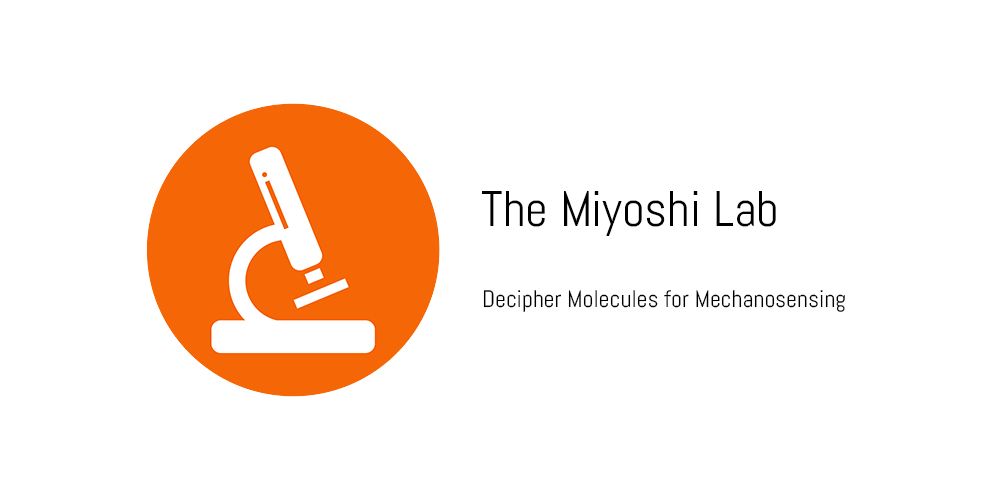
<style>
.page{position:relative;width:1000px;height:500px;background:#ffffff}
.page>*{position:absolute;margin:0}
.t1{font:50px "Abel-Regular";color:#000000}
.t2{font:24px "Abel-Regular";color:#000000}
</style>
<div class="page">
<p class="t1" style="left:482px;top:191px;width:294px;height:45px">The Miyoshi Lab</p>
<p class="t2" style="left:483px;top:290px;width:362px;height:22px">Decipher Molecules for Mechanosensing</p>
</div>
